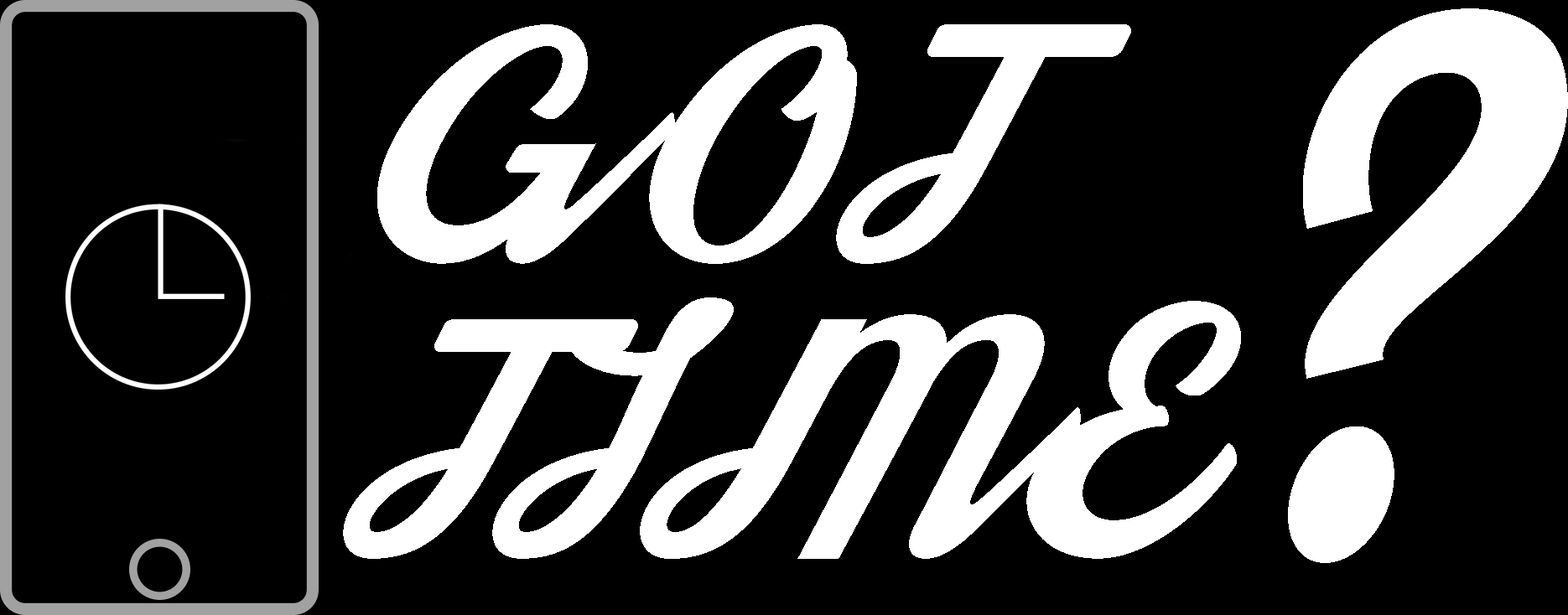
<style>
.page{position:relative;width:1568px;height:615px;background:#000000}
.page>*{position:absolute;margin:0}
.t1{font:507.9px "Streetwear";letter-spacing:0.02em;color:#ffffff;text-transform:uppercase}
.t2{font:243.2px "Streetwear";letter-spacing:0.02em;color:#ffffff;text-transform:uppercase}
.t3{font:243.3px "Streetwear";letter-spacing:0.02em;color:#ffffff;text-transform:uppercase}
</style>
<div class="page">
<p class="t1" style="left:1288px;top:8px;width:280px;height:555px;rotate:-15deg">?</p>
<p class="t2" style="left:377px;top:24px;width:754px;height:240px">Got</p>
<p class="t3" style="left:343px;top:298px;width:898px;height:261px">Time</p>
</div>
